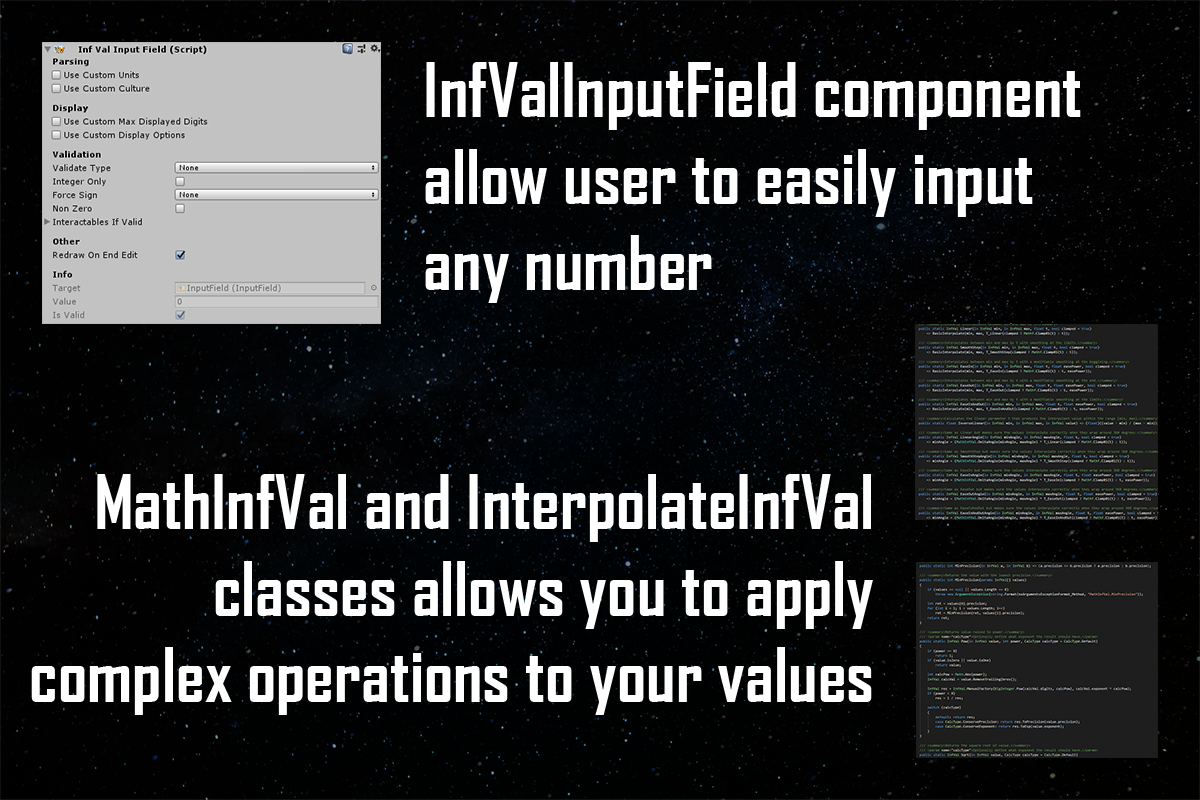
<style>
.page{position:relative;width:1200px;height:800px}
.page>*{position:absolute;margin:0}
.t1{font:72px "AgencyFB-Bold";color:#ffffff}
</style>
<div class="page">
<p class="t1" style="left:425px;top:62px;width:656px;height:241px">InfValInputField component<br>allow user to easily input<br>any number</p>
<p class="t1" style="left:31px;top:474px;width:842px;height:241px;text-align:right">MathInfVal and InterpolateInfVal<br>classes allows you to apply<br>complex operations to your values</p>
</div>
